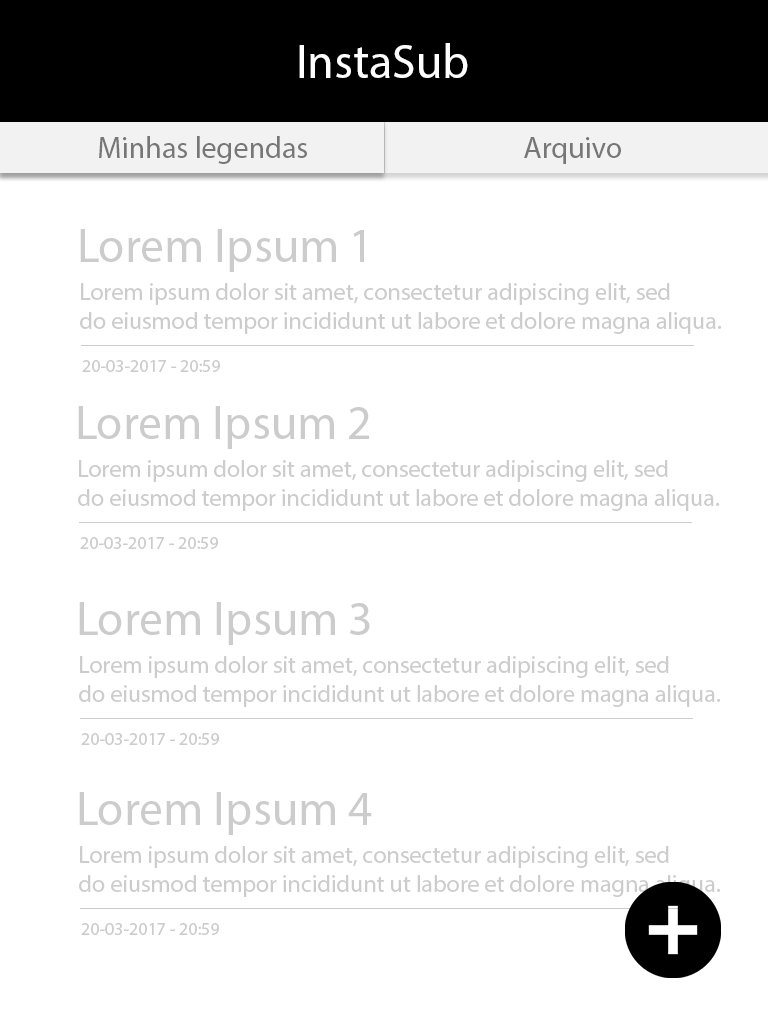
<style>
.page{position:relative;width:768px;height:1024px;background:#ffffff}
.page>*{position:absolute;margin:0}
.t1{font:48px "MyriadPro-Regular";color:#ffffff}
.t2{font:30px "MyriadPro-Regular";color:#777777}
.t3{font:48px "MyriadPro-Regular";color:#cccccc}
.t4{font:24px "MyriadPro-Regular";color:#cccccc}
.t5{font:18px "MyriadPro-Regular";color:#cccccc}
</style>
<div class="page">
<p class="t1" style="left:299px;top:43px;width:169px;height:35px">InstaSub</p>
<p class="t2" style="left:99px;top:136px;width:208px;height:28px">Minhas legendas</p>
<p class="t2" style="left:524px;top:137px;width:97px;height:27px">Arquivo</p>
<p class="t3" style="left:80px;top:229px;width:284px;height:43px">Lorem Ipsum 1</p>
<p class="t4" style="left:80px;top:283px;width:642px;height:51px">Lorem ipsum dolor sit amet, consectetur adipiscing elit, sed <br>do eiusmod tempor incididunt ut labore et dolore magna aliqua.</p>
<p class="t5" style="left:82px;top:360px;width:138px;height:12px">20-03-2017 - 20:59</p>
<p class="t3" style="left:78px;top:406px;width:291px;height:43px">Lorem Ipsum 2</p>
<p class="t4" style="left:78px;top:460px;width:642px;height:51px">Lorem ipsum dolor sit amet, consectetur adipiscing elit, sed <br>do eiusmod tempor incididunt ut labore et dolore magna aliqua.</p>
<p class="t5" style="left:80px;top:537px;width:138px;height:12px">20-03-2017 - 20:59</p>
<p class="t3" style="left:79px;top:602px;width:291px;height:43px">Lorem Ipsum 3</p>
<p class="t4" style="left:79px;top:656px;width:642px;height:51px">Lorem ipsum dolor sit amet, consectetur adipiscing elit, sed <br>do eiusmod tempor incididunt ut labore et dolore magna aliqua.</p>
<p class="t5" style="left:81px;top:733px;width:138px;height:12px">20-03-2017 - 20:59</p>
<p class="t3" style="left:79px;top:792px;width:293px;height:43px">Lorem Ipsum 4</p>
<p class="t4" style="left:79px;top:846px;width:642px;height:51px">Lorem ipsum dolor sit amet, consectetur adipiscing elit, sed <br>do eiusmod tempor incididunt ut labore et dolore magna aliqua.</p>
<p class="t5" style="left:81px;top:923px;width:138px;height:12px">20-03-2017 - 20:59</p>
</div>
